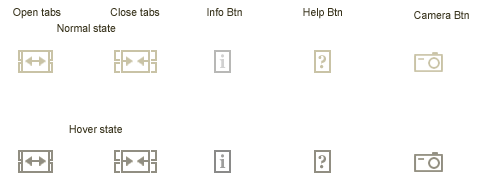
<style>
.page{position:relative;width:500px;height:185px;background:#ffffff}
.page>*{position:absolute;margin:0}
.t1{font:11px/16px "ArialMT";color:#39341d;scale:0.95 1}
.t2{font:11px "ArialMT";color:#39341d;scale:0.95 1}
.t3{font:18px "Georgia-Bold";color:#d1d1d1;scale:0.95 1}
.t4{font:18px "Georgia-Bold";color:#c9c3a6;scale:0.95 1}
.t5{font:18px "Georgia-Bold";color:#9e9e9d;scale:0.95 1}
.t6{font:18px "Georgia-Bold";color:#918e82;scale:0.95 1}
</style>
<div class="page">
<p class="t1" style="left:13px;top:8px;width:147px;height:24px;text-align:center">Open tabs                 Close tabs<br>Normal state</p>
<p class="t2" style="left:207px;top:8px;width:35px;height:8px">Info Btn</p>
<p class="t2" style="left:303px;top:8px;width:39px;height:11px">Help Btn</p>
<p class="t2" style="left:414px;top:11px;width:55px;height:8px">Camera Btn</p>
<p class="t3" style="left:219px;top:54px;width:7px;height:14px">i</p>
<p class="t4" style="left:318px;top:55px;width:8px;height:14px">?</p>
<p class="t2" style="left:69px;top:125px;width:53px;height:8px">Hover state</p>
<p class="t5" style="left:219px;top:154px;width:7px;height:14px">i</p>
<p class="t6" style="left:318px;top:155px;width:8px;height:14px">?</p>
</div>
